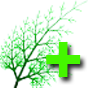
<style>
.page{position:relative;width:88px;height:88px;background:#ffffff}
.page>*{position:absolute;margin:0}
.t1{font:72px "Impact";letter-spacing:0.14em;color:#45f600}
</style>
<div class="page">
<p class="t1" style="left:46px;top:42px;width:35px;height:35px">+</p>
</div>
